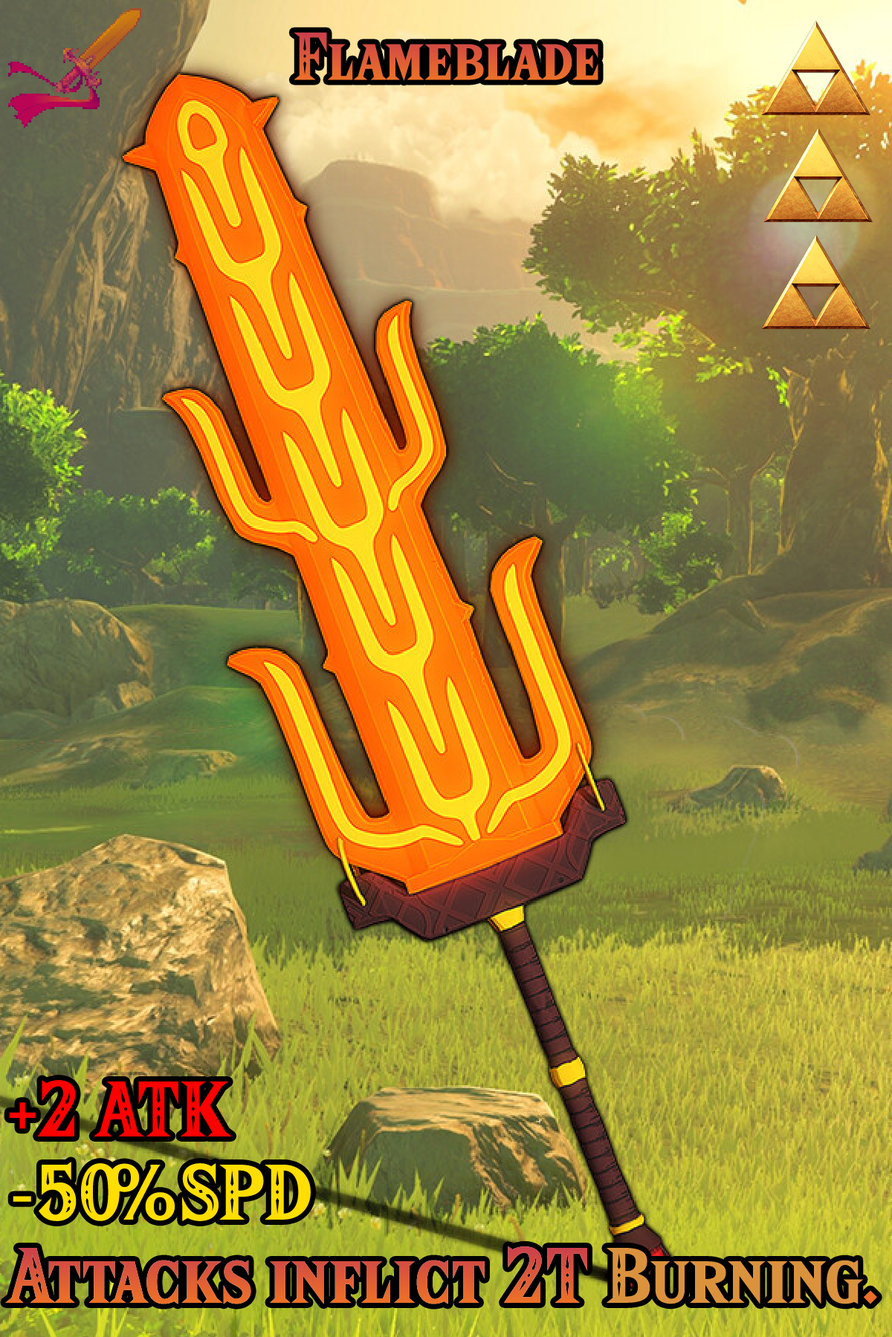
<style>
.page{position:relative;width:892px;height:1337px}
.page>*{position:absolute;margin:0}
.t1{font:101px "HyliaSerifBeta-Regular";color:#e05e35}
.t2{font:117.4px/83.2px "HyliaSerifBeta-Regular";color:#ffffff}
.t3{font:117.4px/83.2px "HyliaSerifBeta-Regular";color:#ff0000}
.t4{font:117.4px/83.2px "HyliaSerifBeta-Regular";color:#ffde00}
.t5{font:117.4px/83.2px "HyliaSerifBeta-Regular";color:#db923d}
.t6{font:117.4px/83.2px "HyliaSerifBeta-Regular";color:#ea6d2a}
</style>
<div class="page">
<p class="t1" style="left:293px;top:32px;width:305px;height:49px">Flameblade</p>
<p class="t2" style="left:5px;top:1080px;width:872px;height:225px"><span class="t3">+2 ATK<br></span><span class="t4">-50% SPD<br></span>Attacks inflict 2T <span class="t5">Burning</span><span class="t6">.</span></p>
</div>
